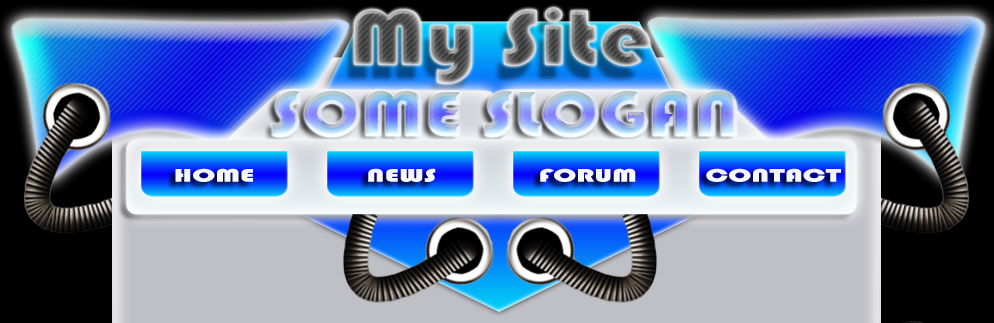
<style>
.page{position:relative;width:994px;height:323px}
.page>*{position:absolute;margin:0}
.t1{font:81.2px "Bauhaus93";scale:1.17 1}
.t2{font:66.4px "Bauhaus93";scale:1.18 1}
.t3{font:19px "Bauhaus93";color:#ffffff;scale:1.6 1}
</style>
<div class="page">
<p class="t1" style="left:354px;top:7px;width:296px;height:77px">My Site</p>
<p class="t2" style="left:272px;top:90px;width:465px;height:48px">SOME SLOGAN</p>
<p class="t3" style="left:175px;top:168px;width:78px;height:14px">HOME</p>
<p class="t3" style="left:368px;top:168px;width:68px;height:14px">NEWS</p>
<p class="t3" style="left:540px;top:168px;width:96px;height:14px">FORUM</p>
<p class="t3" style="left:706px;top:168px;width:135px;height:14px">CONTACT</p>
</div>
